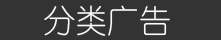
<style>
.page{position:relative;width:221px;height:40px;background:#333333}
.page>*{position:absolute;margin:0}
.t1{font:32px "YouYuan";color:#fdfbfb}
</style>
<div class="page">
<p class="t1" style="left:44px;top:5px;width:126px;height:31px">分类广告</p>
</div>
